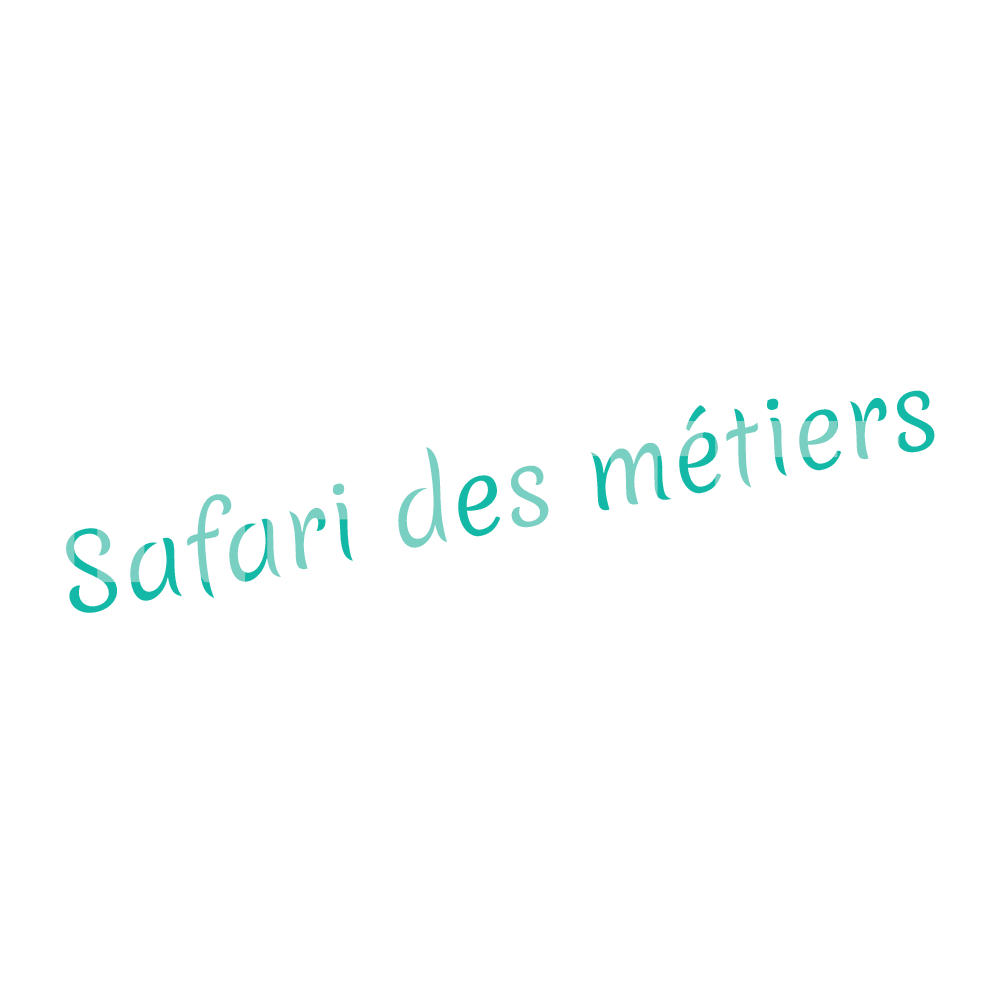
<style>
.page{position:relative;width:1000px;height:1000px;background:#ffffff}
.page>*{position:absolute;margin:0}
.t1{font:100px "Merienda-Light"}
</style>
<div class="page">
<p class="t1" style="left:66px;top:390px;width:869px;height:223px;rotate:-11deg">Safari des métiers</p>
</div>
